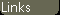
<style>
.page{position:relative;width:60px;height:15px;background:#676753}
.page>*{position:absolute;margin:0}
.t1{font:13.3px "LevenimMT";color:#fefefe}
</style>
<div class="page">
<p class="t1" style="left:2px;top:2px;width:28px;height:10px">Links</p>
</div>
